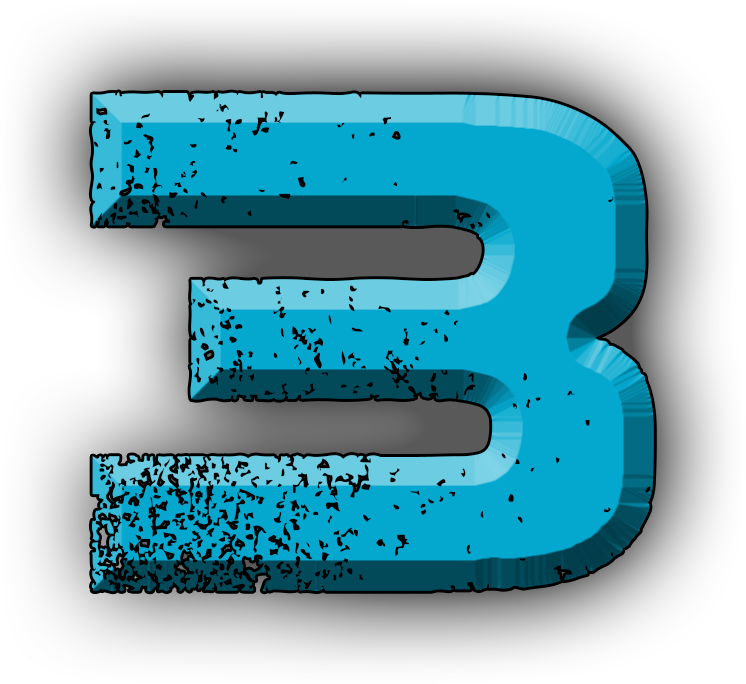
<style>
.page{position:relative;width:746px;height:684px}
.page>*{position:absolute;margin:0}
.t1{font:700px "Coalition"}
</style>
<div class="page">
<p class="t1" style="left:91px;top:92px;width:563px;height:500px">3</p>
</div>
